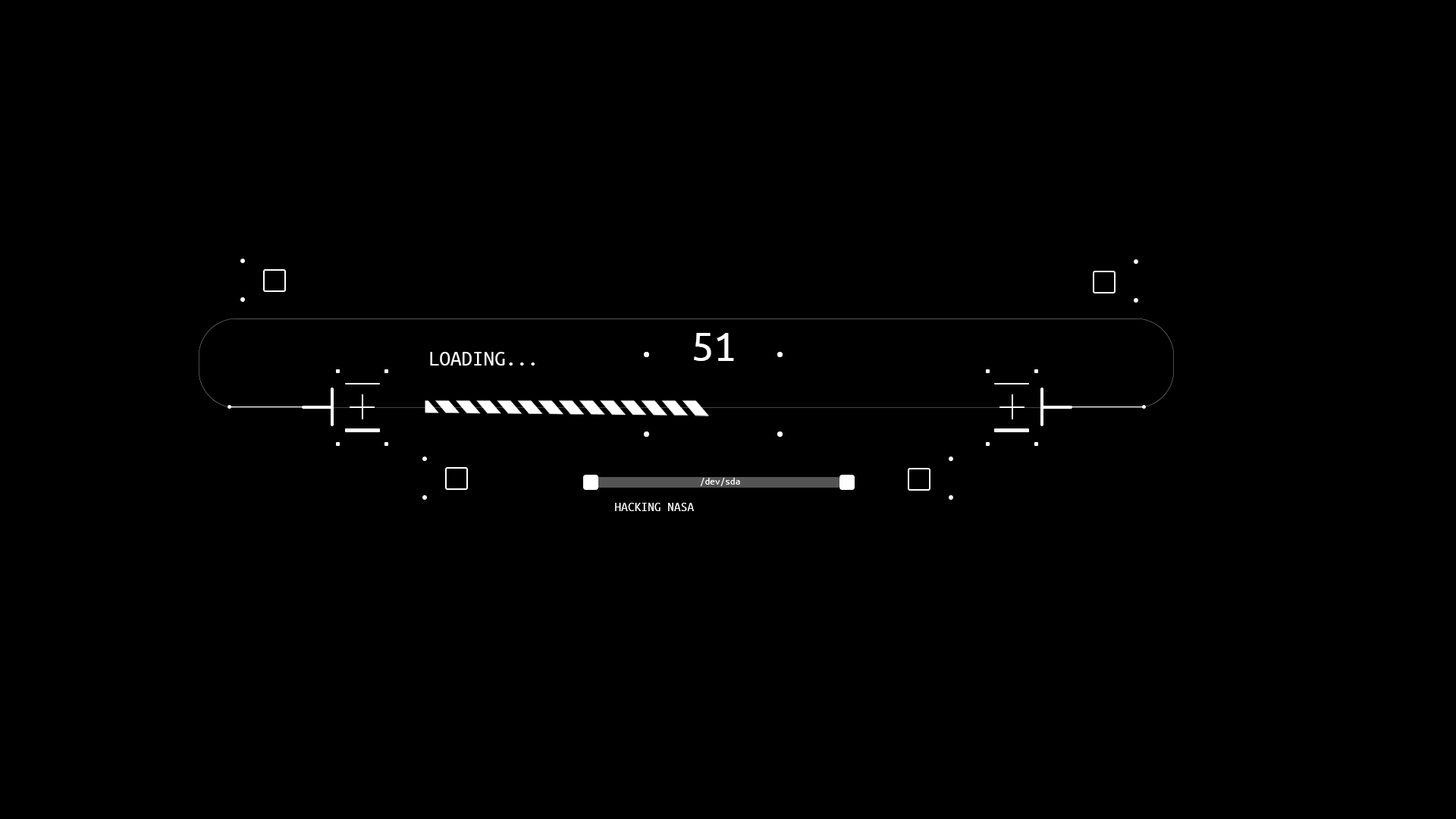
<style>
.page{position:relative;width:1456px;height:819px;background:#000000}
.page>*{position:absolute;margin:0}
.t1{font:45.5px "UbuntuMono-Regular";color:#ffffff}
.t2{font:22px "UbuntuMono-Regular";color:#ffffff}
.t3{font:10.1px "UbuntuMono-Regular";color:#ffffff}
.t4{font:13.2px "UbuntuMono-Regular";color:#ffffff}
</style>
<div class="page">
<p class="t1" style="left:694px;top:333px;width:40px;height:28px">51</p>
<p class="t2" style="left:430px;top:352px;width:105px;height:14px">LOADING...</p>
<p class="t3" style="left:700px;top:478px;width:40px;height:8px">/dev/sda</p>
<p class="t4" style="left:615px;top:503px;width:79px;height:8px">HACKING NASA</p>
</div>
